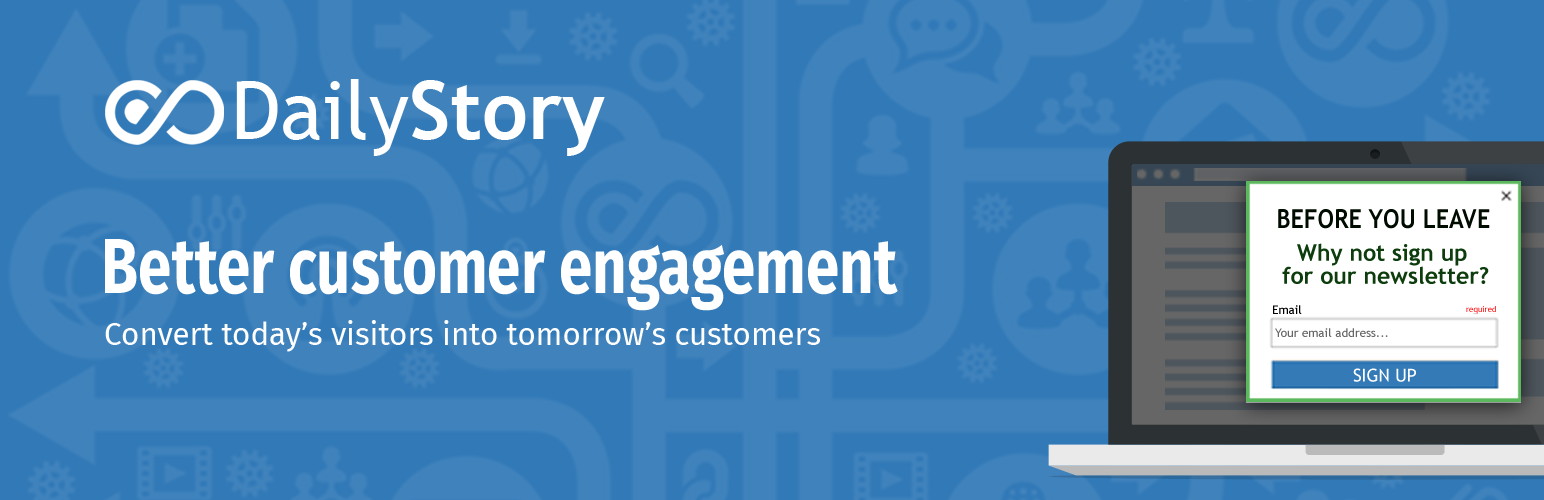
<style>
.page{position:relative;width:1544px;height:500px;background:#3f82bc}
.page>*{position:absolute;margin:0}
.t1{font:80.7px "TrebuchetMS";color:#ffffff}
.t2{font:80.7px "TrebuchetMS-Bold";color:#ffffff}
.t3{font:26.2px "TrebuchetMS-Bold";color:#010c01;scale:0.9 1}
.t4{font:78px "FiraSans-Bold";color:#ffffff;scale:0.77 1}
.t5{font:22.9px/22.9px "TrebuchetMS-Bold";color:#0d3d0d}
.t6{font:12px "TrebuchetMS";color:#000000}
.t7{font:8px "TrebuchetMS"}
.t8{font:31.3px "FiraSans-Regular";color:#ffffff}
.t9{font:12px "TrebuchetMS";color:#666666}
.t10{font:17.8px "TrebuchetMS";color:#ffffff}
</style>
<div class="page">
<p class="t1" style="left:236px;top:79px;width:369px;height:77px">Daily<span class="t2">Story</span></p>
<p class="t3" style="left:1278px;top:209px;width:212px;height:20px">BEFORE YOU LEAVE</p>
<p class="t4" style="left:105px;top:239px;width:793px;height:72px">Better customer engagement</p>
<p class="t5" style="left:1282px;top:243px;width:207px;height:41px;text-align:center">Why not sign up <br>for our newsletter?</p>
<p class="t6" style="left:1273px;top:305px;width:29px;height:9px">Email</p>
<p class="t7" style="left:1466px;top:306px;width:30px;height:8px">required</p>
<p class="t8" style="left:105px;top:320px;width:715px;height:32px">Convert today’s visitors into tomorrow’s customers</p>
<p class="t9" style="left:1275px;top:328px;width:113px;height:9px">Your email address...</p>
<p class="t10" style="left:1353px;top:368px;width:63px;height:14px">SIGN UP</p>
</div>
